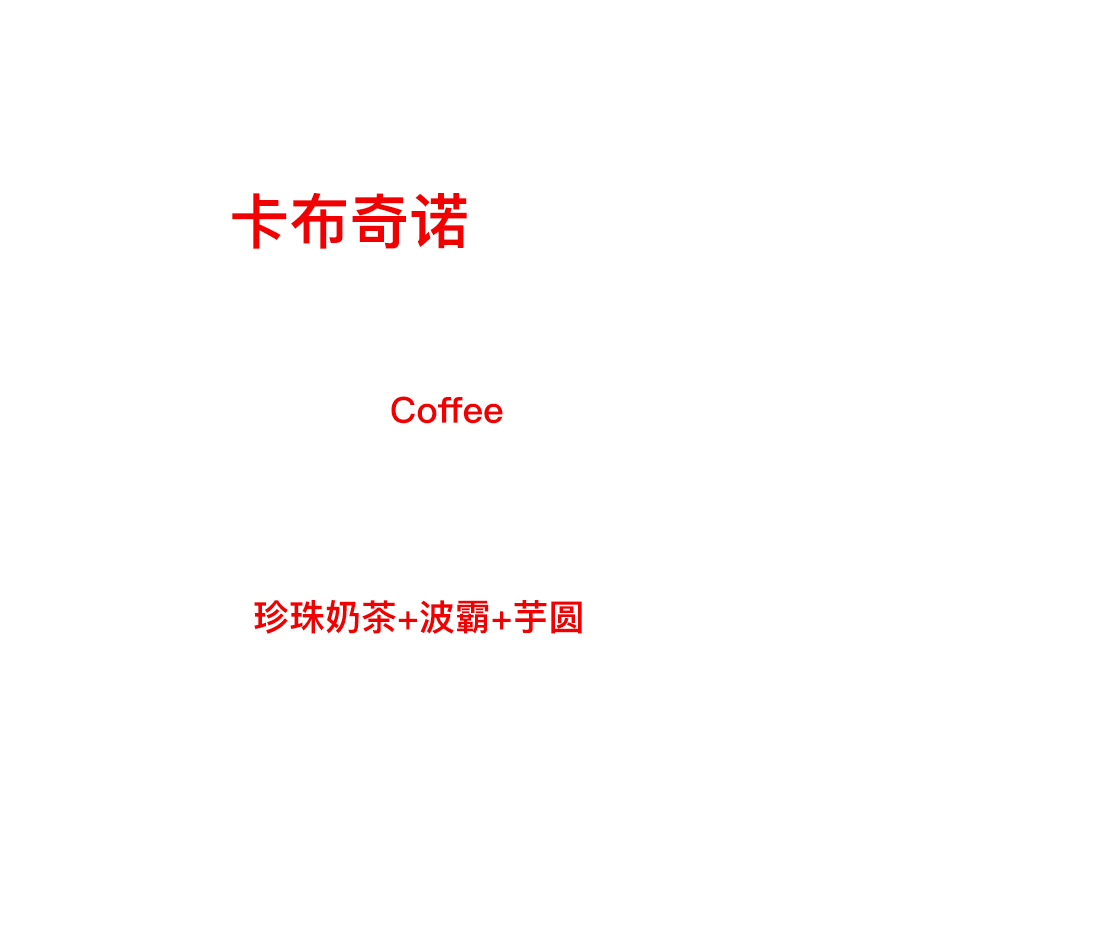
<style>
.page{position:relative;width:1095px;height:926px;background:#ffffff}
.page>*{position:absolute;margin:0}
.t1{font:60px "PingFangSC-Semibold";color:#f00000}
.t2{font:36px "PingFangSC-Semibold";color:#f00000}
</style>
<div class="page">
<p class="t1" style="left:232px;top:193px;width:235px;height:56px">卡布奇诺</p>
<p class="t2" style="left:391px;top:396px;width:112px;height:28px">Coffee</p>
<p class="t2" style="left:254px;top:600px;width:328px;height:34px">珍珠奶茶+波霸+芋圆</p>
</div>
